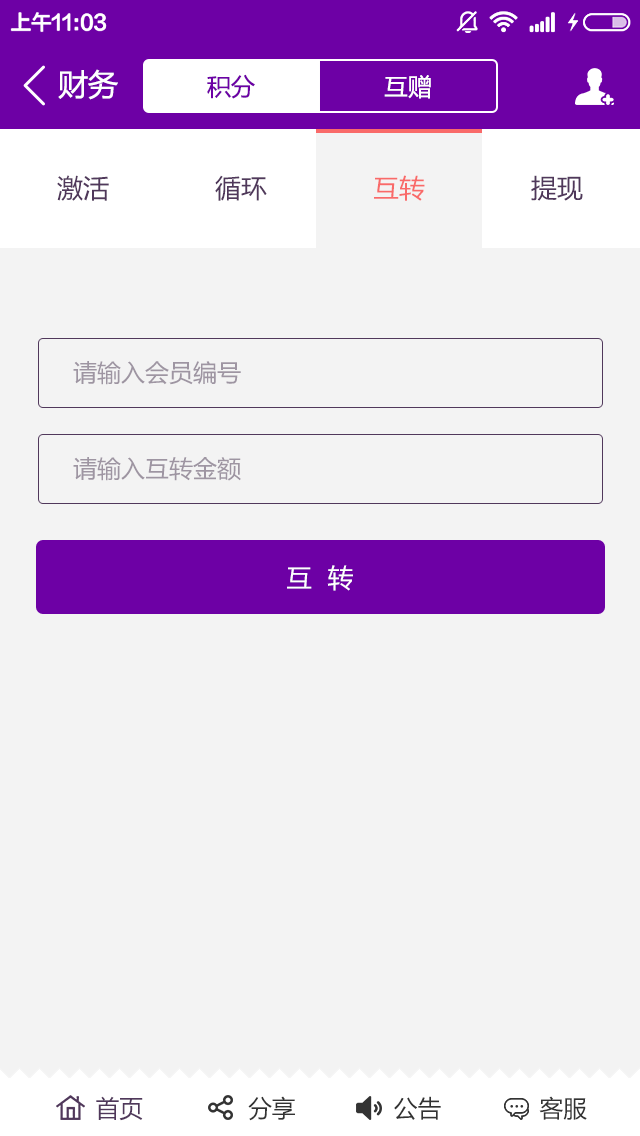
<style>
.page{position:relative;width:640px;height:1136px;background:#f3f3f3}
.page>*{position:absolute;margin:0}
.t1{font:30px "MicrosoftYaHei";color:#ffffff}
.t2{font:24px "MicrosoftYaHei";color:#6d00a5}
.t3{font:24px "MicrosoftYaHei";color:#ffffff}
.t4{font:26px "MicrosoftYaHei";color:#50385b}
.t5{font:26px "MicrosoftYaHei";color:#f96a69}
.t6{font:24px "MicrosoftYaHei";color:#9e95a2}
.t7{font:26px "MicrosoftYaHei";color:#ffffff}
.t8{font:24px "MicrosoftYaHei";color:#333333}
.t9{font:24px "MicrosoftYaHei";color:#50385b}
</style>
<div class="page">
<p class="t1" style="left:58px;top:69px;width:60px;height:31px">财务</p>
<p class="t2" style="left:207px;top:74px;width:48px;height:25px">积分</p>
<p class="t3" style="left:384px;top:75px;width:47px;height:24px">互赠</p>
<p class="t4" style="left:57px;top:175px;width:52px;height:26px">激活</p>
<p class="t4" style="left:215px;top:175px;width:52px;height:26px">循环</p>
<p class="t5" style="left:374px;top:175px;width:51px;height:26px">互转</p>
<p class="t4" style="left:531px;top:175px;width:52px;height:26px">提现</p>
<p class="t6" style="left:73px;top:361px;width:168px;height:24px">请输入会员编号</p>
<p class="t6" style="left:73px;top:457px;width:168px;height:24px">请输入互转金额</p>
<p class="t7" style="left:287px;top:565px;width:66px;height:26px">互  转</p>
<p class="t8" style="left:96px;top:1096px;width:491px;height:25px"><span class="t9">首页</span>               分享              公告              客服</p>
</div>
